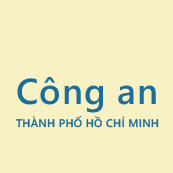
<style>
.page{position:relative;width:173px;height:173px;background:#f7f1c4}
.page>*{position:absolute;margin:0}
.t1{font:36px "SegoeWP-Semibold";letter-spacing:0.025em;color:#1d6d9b}
.t2{font:11px "SegoeWP-Semibold";letter-spacing:0.025em;color:#1d6d9b}
</style>
<div class="page">
<p class="t1" style="left:17px;top:77px;width:139px;height:36px">Công an</p>
<p class="t2" style="left:16px;top:116px;width:143px;height:12px">THÀNH PHỐ HỒ CHÍ MINH</p>
</div>
